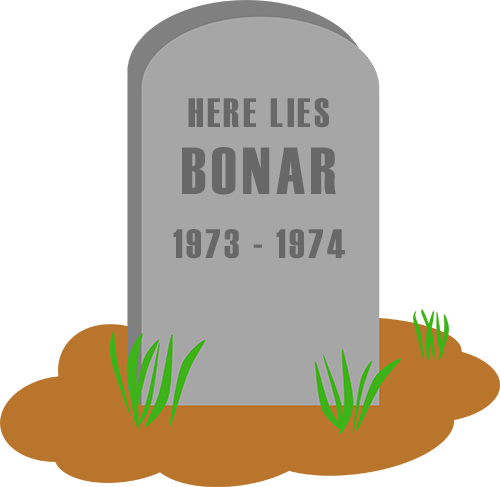
<style>
.page{position:relative;width:500px;height:487px;background:#ffffff}
.page>*{position:absolute;margin:0}
.t1{font:41px/64.1px "Haettenschweiler";letter-spacing:0.08em;color:#686868}
.t2{font:41px/66.6px "Haettenschweiler";letter-spacing:0.08em;color:#686868}
.t3{font:66.6px/66.6px "Haettenschweiler";letter-spacing:0.08em;color:#686868}
</style>
<div class="page">
<p class="t1" style="left:173px;top:98px;width:172px;height:161px;text-align:center"><span class="t2">HERE LIES </span><span class="t3">BONAR<br></span>1973 - 1974</p>
</div>
